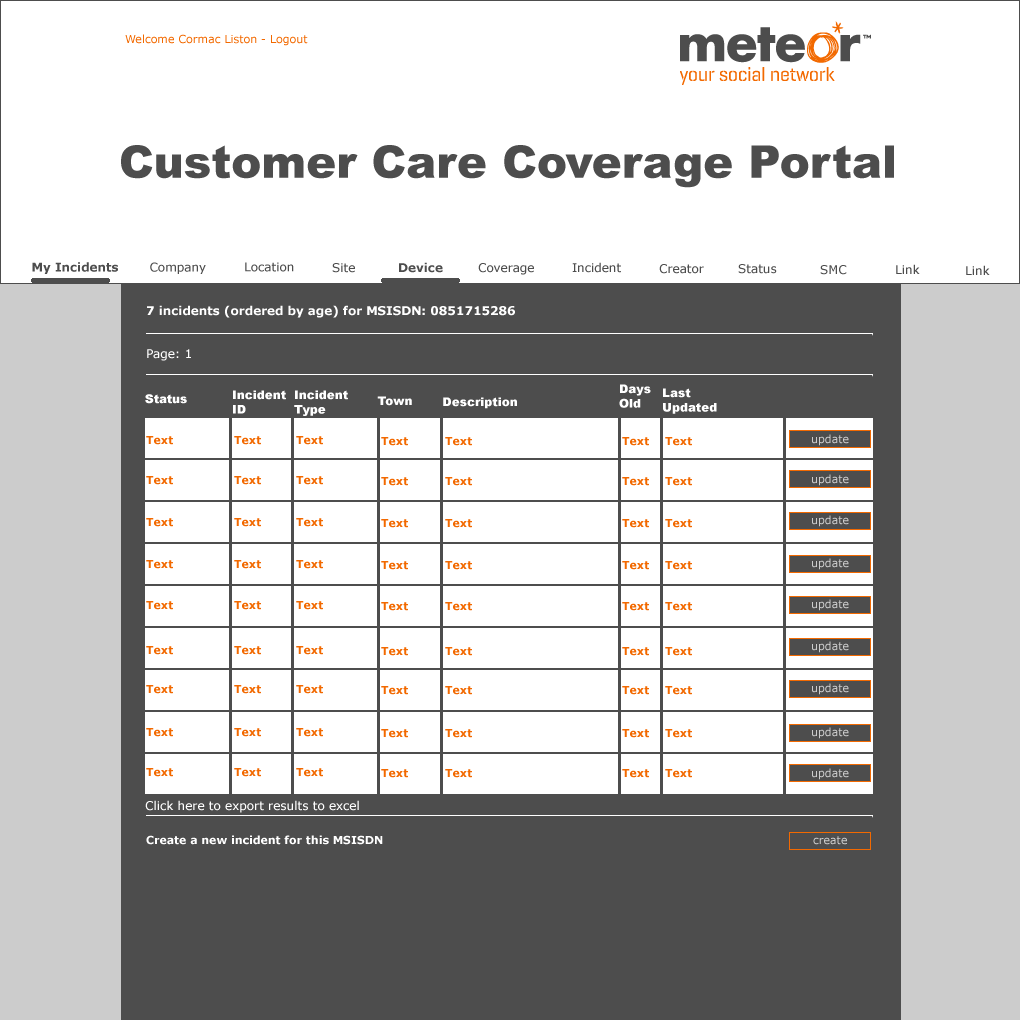
<style>
.page{position:relative;width:1020px;height:1020px;background:#ffffff}
.page>*{position:absolute;margin:0}
.t1{font:11px "Verdana";color:#f26900}
.t2{font:12px "Verdana-Bold";color:#4d4d4d}
.t3{font:12px "Verdana";color:#4d4d4d}
.t4{font:12px "Verdana-Bold";color:#ffffff}
.t5{font:12px "Verdana";color:#ffffff}
.t6{font:12px "Arial-Black";color:#ffffff}
.t7{font:11px "Verdana";color:#cccccc}
.t8{font:11px "Verdana-Bold";color:#ffffff}
</style>
<div class="page">
<p class="t1" style="left:125px;top:34px;width:183px;height:12px">Welcome Cormac Liston - Logout</p>
<p class="t2" style="left:32px;top:262px;width:86px;height:12px">My Incidents</p>
<p class="t3" style="left:150px;top:262px;width:56px;height:12px">Company</p>
<p class="t3" style="left:245px;top:262px;width:49px;height:10px">Location</p>
<p class="t3" style="left:332px;top:263px;width:23px;height:10px">Site</p>
<p class="t2" style="left:399px;top:262px;width:44px;height:11px">Device</p>
<p class="t3" style="left:478px;top:263px;width:56px;height:12px">Coverage</p>
<p class="t3" style="left:572px;top:262px;width:49px;height:11px">Incident</p>
<p class="t3" style="left:659px;top:264px;width:45px;height:10px">Creator</p>
<p class="t3" style="left:738px;top:264px;width:39px;height:10px">Status</p>
<p class="t3" style="left:820px;top:265px;width:27px;height:10px">SMC</p>
<p class="t3" style="left:896px;top:264px;width:24px;height:10px">Link</p>
<p class="t3" style="left:966px;top:265px;width:24px;height:10px">Link</p>
<p class="t4" style="left:147px;top:305px;width:368px;height:13px">7 incidents (ordered by age) for MSISDN: 0851715286</p>
<p class="t5" style="left:147px;top:349px;width:44px;height:12px">Page: 1</p>
<p class="t6" style="left:233px;top:390px;width:53px;height:24px">Incident<br>ID</p>
<p class="t6" style="left:294px;top:390px;width:54px;height:26px">Incident<br>Type</p>
<p class="t6" style="left:619px;top:384px;width:32px;height:24px">Days<br>Old</p>
<p class="t6" style="left:663px;top:388px;width:54px;height:26px">Last<br>Updated</p>
<p class="t6" style="left:145px;top:394px;width:42px;height:10px">Status</p>
<p class="t6" style="left:377px;top:396px;width:35px;height:10px">Town</p>
<p class="t6" style="left:443px;top:397px;width:74px;height:12px">Description</p>
<p class="t7" style="left:812px;top:434px;width:37px;height:12px">update</p>
<p class="t7" style="left:812px;top:474px;width:37px;height:12px">update</p>
<p class="t7" style="left:812px;top:515px;width:37px;height:12px">update</p>
<p class="t7" style="left:812px;top:558px;width:37px;height:12px">update</p>
<p class="t7" style="left:812px;top:599px;width:37px;height:12px">update</p>
<p class="t7" style="left:812px;top:641px;width:37px;height:12px">update</p>
<p class="t7" style="left:812px;top:683px;width:37px;height:12px">update</p>
<p class="t7" style="left:812px;top:727px;width:37px;height:12px">update</p>
<p class="t7" style="left:812px;top:768px;width:37px;height:12px">update</p>
<p class="t5" style="left:145px;top:800px;width:214px;height:13px">Click here to export results to excel</p>
<p class="t8" style="left:146px;top:835px;width:237px;height:10px">Create a new incident for this MSISDN</p>
<p class="t7" style="left:813px;top:836px;width:34px;height:9px">create</p>
</div>
